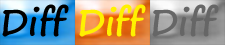
<style>
.page{position:relative;width:225px;height:45px}
.page>*{position:absolute;margin:0}
.t1{font:35.9px "SegoePrint-Bold";color:#000000}
.t2{font:35.9px "SegoePrint-Bold";color:#fff100}
.t3{font:35.9px "SegoePrint-Bold";color:#666666}
</style>
<div class="page">
<p class="t1" style="left:2px;top:4px;width:67px;height:33px">Diff</p>
<p class="t2" style="left:79px;top:4px;width:67px;height:33px">Diff</p>
<p class="t3" style="left:152px;top:4px;width:67px;height:33px">Diff</p>
</div>
